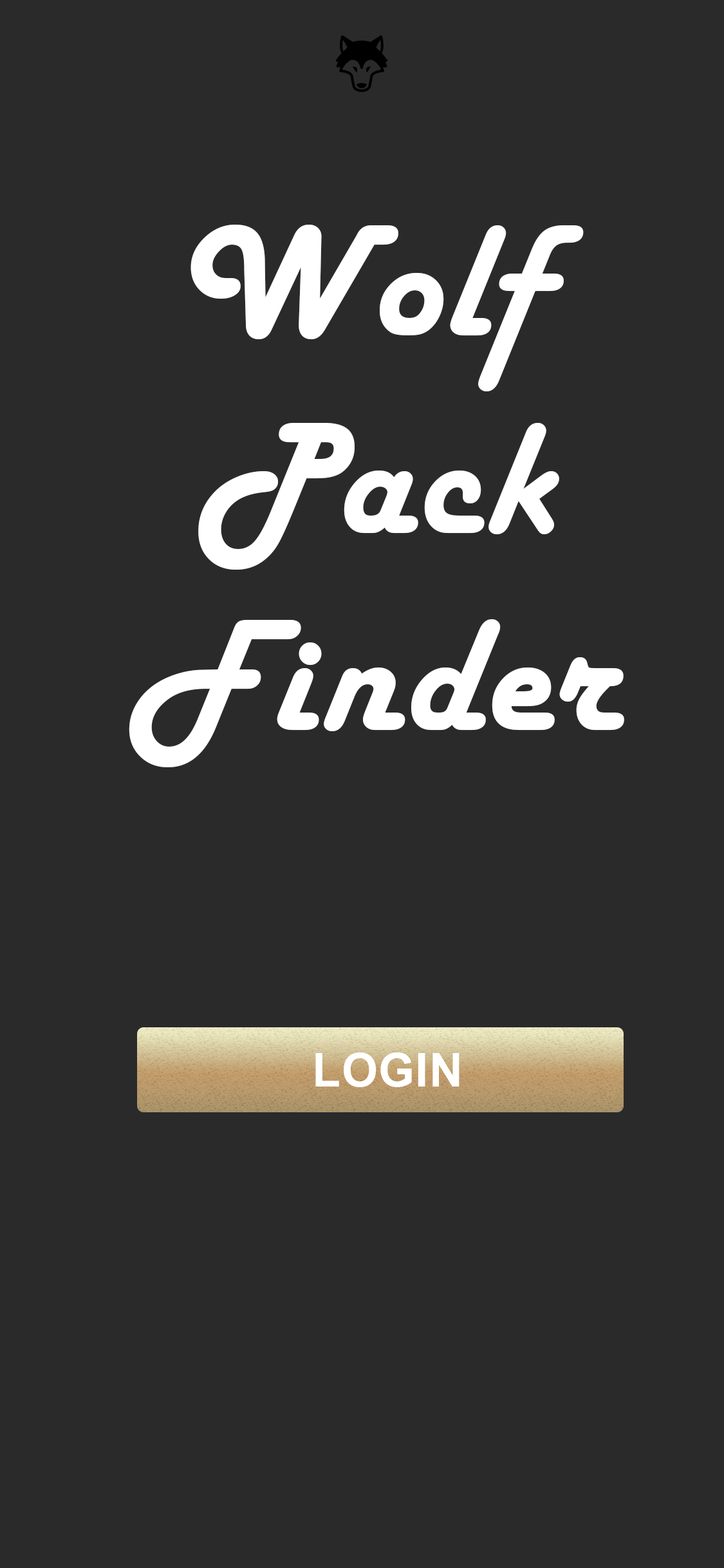
<style>
.page{position:relative;width:724px;height:1568px;background:#2a2a2a}
.page>*{position:absolute;margin:0}
.t1{font:164.5px "HarlowSolid";letter-spacing:0.02em;color:#ffffff}
.t2{font:46.3px "Arial-BoldMT";letter-spacing:0.02em;color:#ffffff}
</style>
<div class="page">
<p class="t1" style="left:191px;top:225px;width:393px;height:166px">Wolf</p>
<p class="t1" style="left:129px;top:423px;width:495px;height:344px;text-align:center">Pack<br>Finder</p>
<p class="t2" style="left:315px;top:1052px;width:145px;height:35px">LOGIN</p>
</div>
